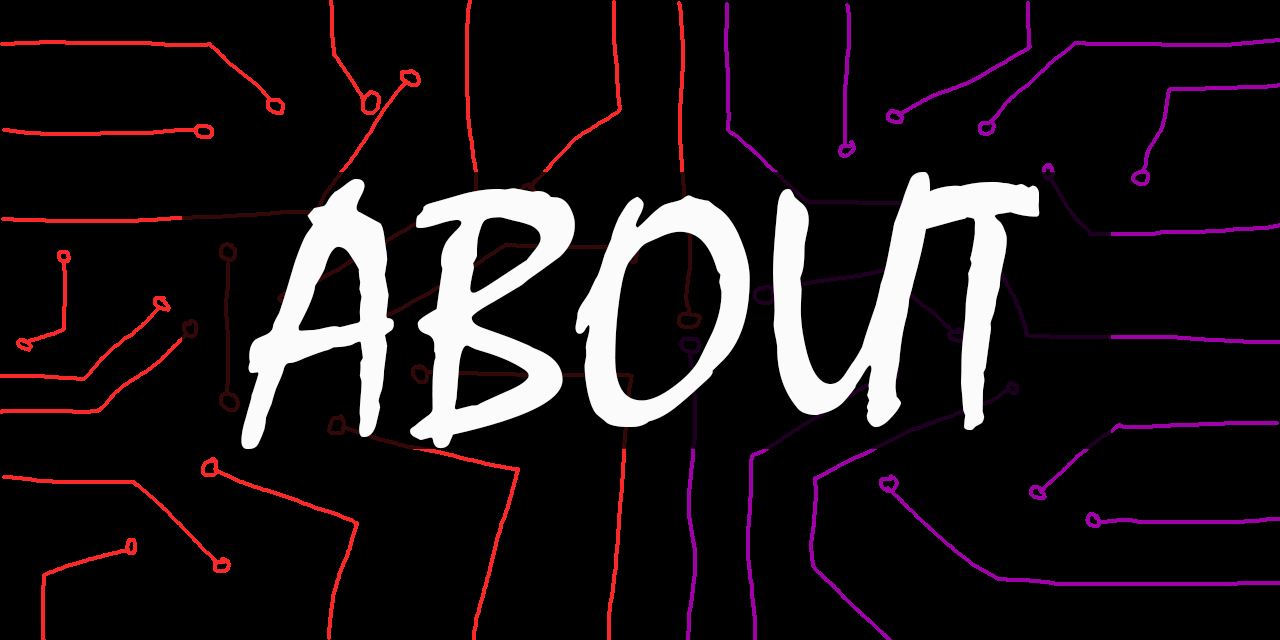
<style>
.page{position:relative;width:1280px;height:640px;background:#000000}
.page>*{position:absolute;margin:0}
.t1{font:350px "Mistral";color:#fbfbfb}
</style>
<div class="page">
<p class="t1" style="left:241px;top:172px;width:799px;height:277px">ABOUT</p>
</div>
